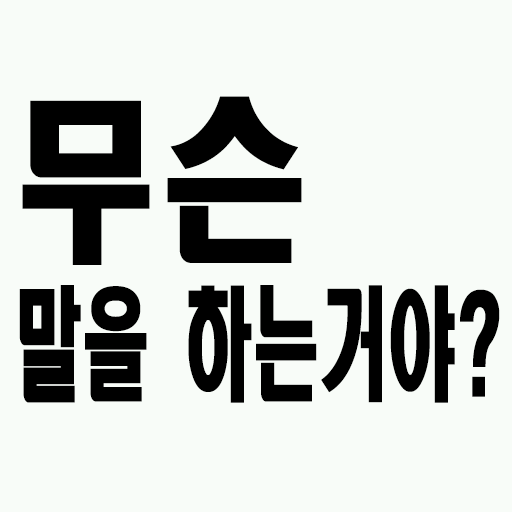
<style>
.page{position:relative;width:512px;height:512px;background:#f8fcf8}
.page>*{position:absolute;margin:0}
.t1{font:122.4px/170px "HeadlineR-HM";color:#000000;scale:0.56 1}
.t2{font:176.4px/170px "HeadlineR-HM";color:#000000;scale:0.83 1}
</style>
<div class="page">
<p class="t1" style="left:19px;top:96px;width:481px;height:307px"><span class="t2">무슨<br></span>말을 하는거야?</p>
</div>
